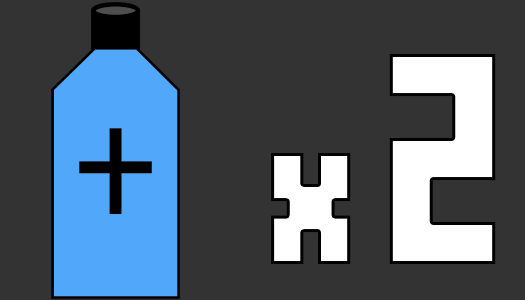
<style>
.page{position:relative;width:525px;height:300px;background:#333333}
.page>*{position:absolute;margin:0}
.t1{font:125px "FFFForward";letter-spacing:0.2em;color:#ffffff}
.t2{font:166.7px "FFFForward";letter-spacing:0.2em;color:#ffffff}
</style>
<div class="page">
<p class="t1" style="left:271px;top:54px;width:225px;height:210px">x<span class="t2">2</span></p>
</div>
